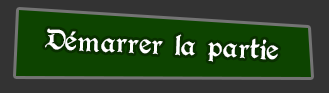
<style>
.page{position:relative;width:329px;height:93px;background:#0d4400}
.page>*{position:absolute;margin:0}
.t1{font:32px "Augusta-Regular";color:#ffffff}
</style>
<div class="page">
<p class="t1" style="left:45px;top:28px;width:234px;height:34px;rotate:2deg">Démarrer la partie</p>
</div>
